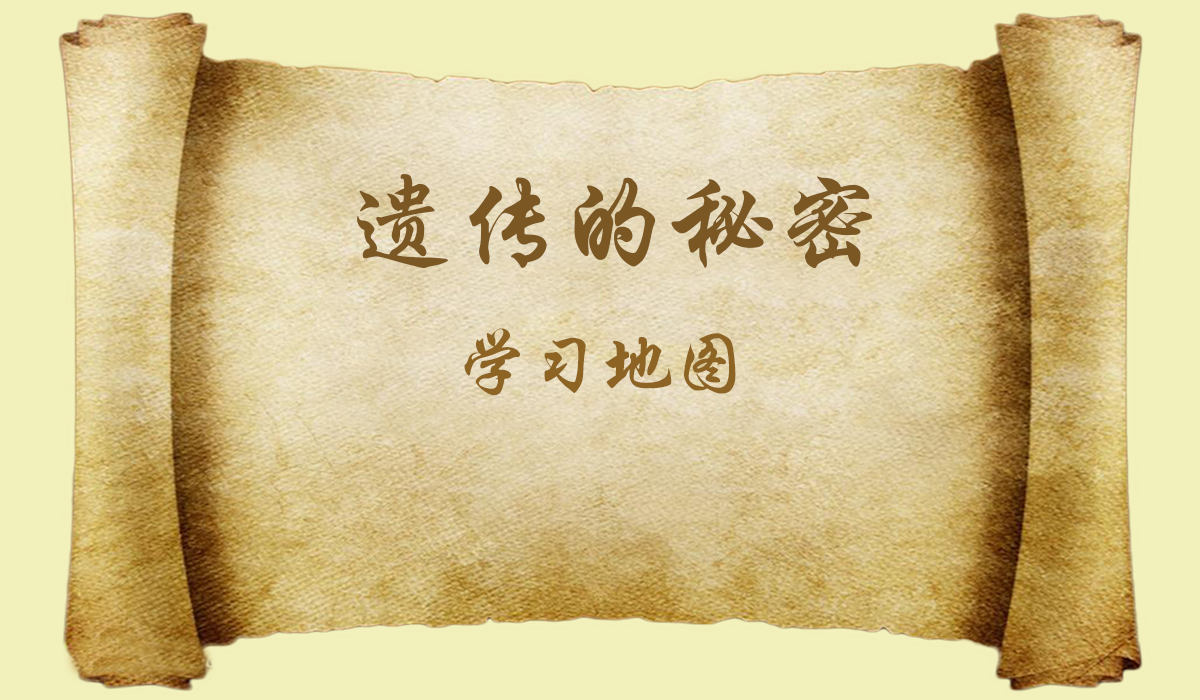
<style>
.page{position:relative;width:1200px;height:700px;background:#f2f0bb}
.page>*{position:absolute;margin:0}
.t1{font:108px "STXingkaiTC-Bold";color:#7b5724}
.t2{font:72px "STXingkaiTC-Bold";color:#8d6424}
</style>
<div class="page">
<p class="t1" style="left:357px;top:174px;width:515px;height:95px">遗传的秘密</p>
<p class="t2" style="left:464px;top:328px;width:272px;height:68px">学习地图</p>
</div>
